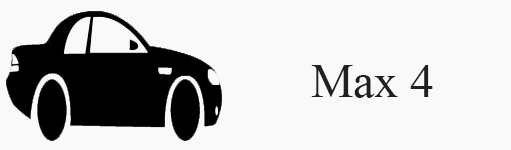
<style>
.page{position:relative;width:511px;height:150px;background:#f9f9f9}
.page>*{position:absolute;margin:0}
.t1{font:48px "TimesNewRomanPSMT";color:#231f20}
</style>
<div class="page">
<p class="t1" style="left:311px;top:65px;width:122px;height:33px">Max 4</p>
</div>
